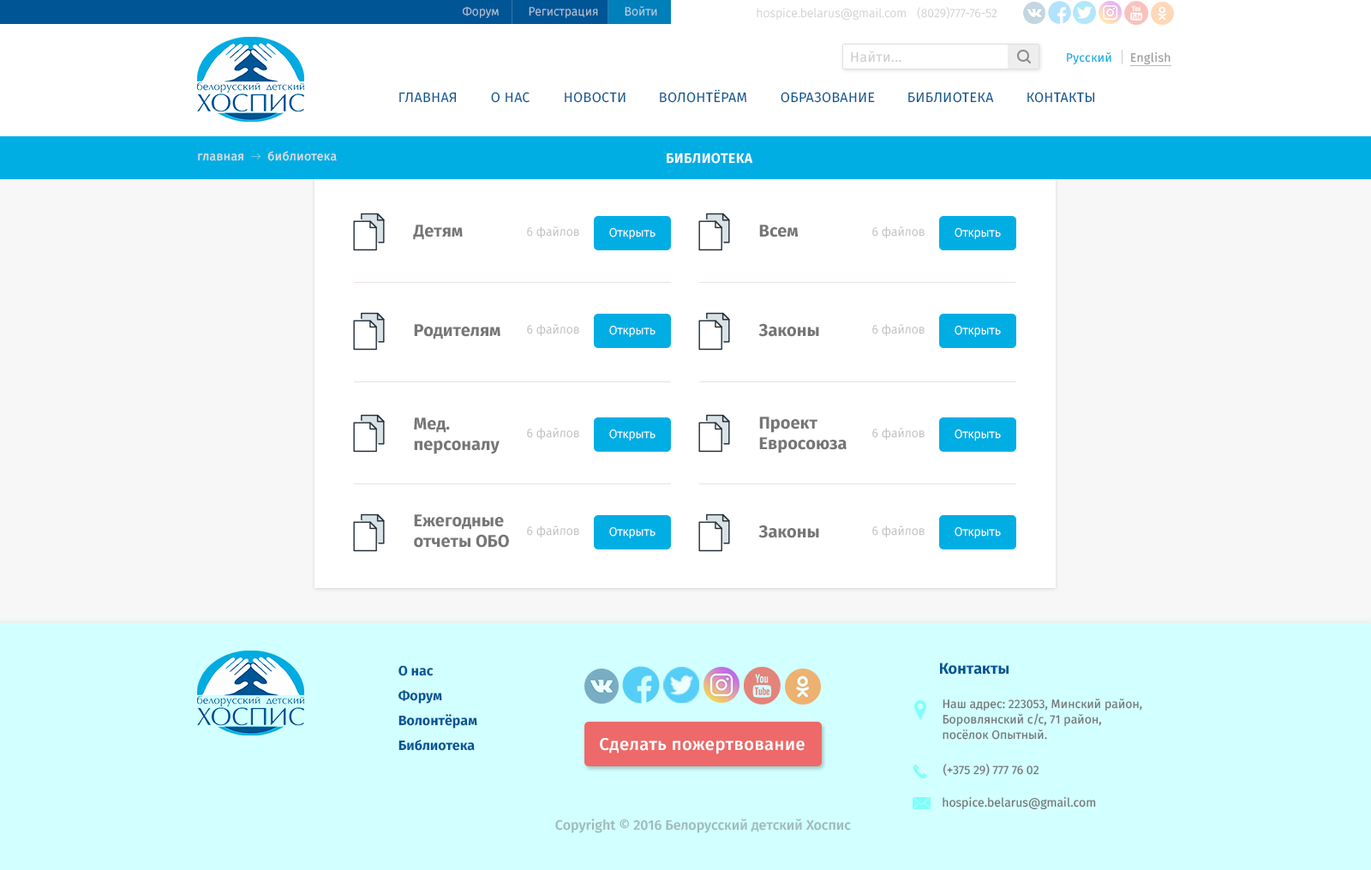
<style>
.page{position:relative;width:1371px;height:870px;background:#ffffff}
.page>*{position:absolute;margin:0}
.t1{font:12px "FiraSans-Light";color:#b8c6d9}
.t2{font:12px "FiraSans-Light";color:#b8d2e5}
.t3{font:12px "FiraSans-Light";color:#d1d1d1}
.t4{font:12px "FiraSans-Light"}
.t5{font:13.7px "FiraSans-Regular";letter-spacing:0.025em;color:#cdcdcd}
.t6{font:12px "FiraSans-Regular";letter-spacing:0.025em;color:#00ace1}
.t7{font:12px "FiraSans-Regular";letter-spacing:0.025em;color:#999999;text-decoration:underline}
.t8{font:13.7px "FiraSans-Regular";letter-spacing:0.025em;color:#095691;text-transform:uppercase}
.t9{font:12px "FiraSans-Regular";letter-spacing:0.025em;color:#e0dfdf}
.t10{font:13.7px "FiraSans-Medium";letter-spacing:0.025em;color:#ffffff;text-transform:uppercase}
.t11{font:17.1px "FiraSans-Bold";color:#767676}
.t12{font:12px "FiraSans-Light";color:#bdbdbd}
.t13{font:12px "FiraSans-Light";color:#ffffff}
.t14{font:13.7px "FiraSans-Bold";color:#005595}
.t15{font:15.4px "FiraSans-Bold";color:#005595}
.t16{font:12px/15.4px "FiraSans-Regular";color:#727272}
.t17{font:17.1px "FiraSans-Medium";letter-spacing:0.025em;color:#ffffff}
.t18{font:12px "FiraSans-Regular";color:#727272}
.t19{font:13.7px "FiraSans-Medium";color:#9fbaba}
</style>
<div class="page">
<p class="t1" style="left:463px;top:6px;width:36px;height:12px">Форум</p>
<p class="t2" style="left:625px;top:6px;width:32px;height:10px">Войти</p>
<p class="t1" style="left:529px;top:7px;width:69px;height:11px">Регистрация</p>
<p class="t3" style="left:757px;top:8px;width:149px;height:12px">hospice.belarus@gmail.com</p>
<p class="t4" style="left:917px;top:7px;width:80px;height:12px">(8029)777-76-52</p>
<p class="t5" style="left:851px;top:51px;width:50px;height:12px">Найти...</p>
<p class="t6" style="left:1067px;top:52px;width:44px;height:13px">Русский</p>
<p class="t7" style="left:1129px;top:51px;width:42px;height:16px">English</p>
<p class="t8" style="left:660px;top:89px;width:87px;height:14px">Волонтёрам</p>
<p class="t8" style="left:399px;top:92px;width:58px;height:11px">Главная</p>
<p class="t8" style="left:491px;top:92px;width:39px;height:11px">о нас</p>
<p class="t8" style="left:565px;top:92px;width:61px;height:11px">новости</p>
<p class="t8" style="left:781px;top:92px;width:94px;height:11px">образование</p>
<p class="t8" style="left:908px;top:92px;width:86px;height:11px">Библиотека</p>
<p class="t8" style="left:1027px;top:92px;width:68px;height:11px">КОнтакты</p>
<p class="t9" style="left:198px;top:153px;width:45px;height:8px">главная</p>
<p class="t9" style="left:267px;top:151px;width:70px;height:10px">библиотека</p>
<p class="t10" style="left:667px;top:153px;width:85px;height:11px">библиотека</p>
<p class="t11" style="left:413px;top:225px;width:50px;height:15px">Детям</p>
<p class="t12" style="left:527px;top:226px;width:52px;height:12px">6 файлов</p>
<p class="t13" style="left:609px;top:228px;width:47px;height:11px">Открыть</p>
<p class="t11" style="left:759px;top:225px;width:39px;height:12px">Всем</p>
<p class="t12" style="left:872px;top:226px;width:53px;height:12px">6 файлов</p>
<p class="t13" style="left:955px;top:228px;width:46px;height:11px">Открыть</p>
<p class="t11" style="left:414px;top:324px;width:86px;height:15px">Родителям</p>
<p class="t12" style="left:527px;top:324px;width:52px;height:12px">6 файлов</p>
<p class="t13" style="left:609px;top:326px;width:47px;height:11px">Открыть</p>
<p class="t11" style="left:758px;top:323px;width:61px;height:14px">Законы</p>
<p class="t12" style="left:872px;top:324px;width:53px;height:12px">6 файлов</p>
<p class="t13" style="left:955px;top:326px;width:46px;height:11px">Открыть</p>
<p class="t11" style="left:414px;top:417px;width:86px;height:37px">Мед.<br>персоналу</p>
<p class="t11" style="left:759px;top:416px;width:88px;height:37px">Проект <br>Евросоюза</p>
<p class="t12" style="left:527px;top:428px;width:52px;height:12px">6 файлов</p>
<p class="t13" style="left:609px;top:429px;width:47px;height:11px">Открыть</p>
<p class="t12" style="left:872px;top:428px;width:53px;height:12px">6 файлов</p>
<p class="t13" style="left:955px;top:429px;width:46px;height:11px">Открыть</p>
<p class="t11" style="left:414px;top:514px;width:95px;height:34px">Ежегодные отчеты ОБО</p>
<p class="t12" style="left:527px;top:525px;width:52px;height:12px">6 файлов</p>
<p class="t13" style="left:609px;top:527px;width:47px;height:11px">Открыть</p>
<p class="t11" style="left:758px;top:524px;width:61px;height:14px">Законы</p>
<p class="t12" style="left:872px;top:525px;width:53px;height:12px">6 файлов</p>
<p class="t13" style="left:955px;top:527px;width:46px;height:11px">Открыть</p>
<p class="t14" style="left:398px;top:665px;width:36px;height:11px">О нас</p>
<p class="t15" style="left:940px;top:662px;width:69px;height:12px">Контакты</p>
<p class="t14" style="left:398px;top:690px;width:44px;height:14px">Форум</p>
<p class="t16" style="left:943px;top:698px;width:199px;height:41px">Наш адрес: 223053, Минский район,<br>Боровлянский с/c, 71 район, <br>посёлок Опытный.</p>
<p class="t14" style="left:398px;top:714px;width:79px;height:14px">Волонтёрам</p>
<p class="t17" style="left:600px;top:738px;width:205px;height:16px">Сделать пожертвование</p>
<p class="t14" style="left:398px;top:739px;width:77px;height:12px">Библиотека</p>
<p class="t18" style="left:943px;top:763px;width:96px;height:13px">(+375 29) 777 76 02</p>
<p class="t18" style="left:943px;top:796px;width:153px;height:14px">hospice.belarus@gmail.com</p>
<p class="t19" style="left:555px;top:818px;width:296px;height:15px">Copyright © 2016 Белорусский детский Хоспис</p>
</div>
